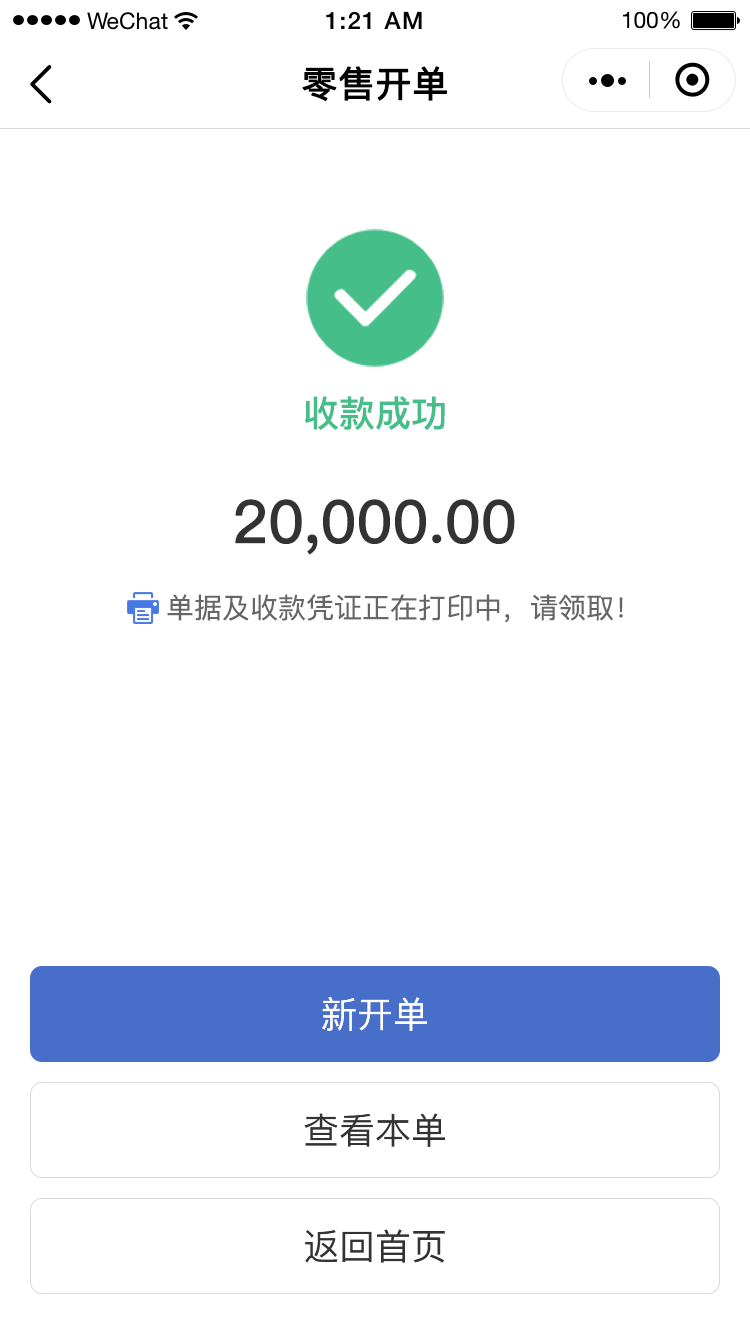
<style>
.page{position:relative;width:750px;height:1334px;background:#ffffff}
.page>*{position:absolute;margin:0}
.t1{font:36px "PingFang-SC-Medium";color:#000000;font-weight:bold}
.t2{font:36px "PingFang-SC-Bold";color:#46be8a}
.t3{font:60px "PingFang-SC-Bold";color:#333333}
.t4{font:28px "PingFang-SC-Medium";color:#666666}
.t5{font:36px "PingFang-SC-Medium";color:#ffffff}
.t6{font:36px "PingFang-SC-Medium";color:#333333}
</style>
<div class="page">
<p class="t1" style="left:302px;top:66px;width:145px;height:36px">零售开单</p>
<p class="t2" style="left:305px;top:396px;width:140px;height:34px">收款成功</p>
<p class="t3" style="left:235px;top:499px;width:280px;height:56px">20,000.00</p>
<p class="t4" style="left:167px;top:594px;width:456px;height:29px">单据及收款凭证正在打印中，请领取！</p>
<p class="t5" style="left:322px;top:997px;width:105px;height:34px">新开单</p>
<p class="t6" style="left:304px;top:1113px;width:141px;height:34px">查看本单</p>
<p class="t6" style="left:305px;top:1229px;width:140px;height:34px">返回首页</p>
</div>
